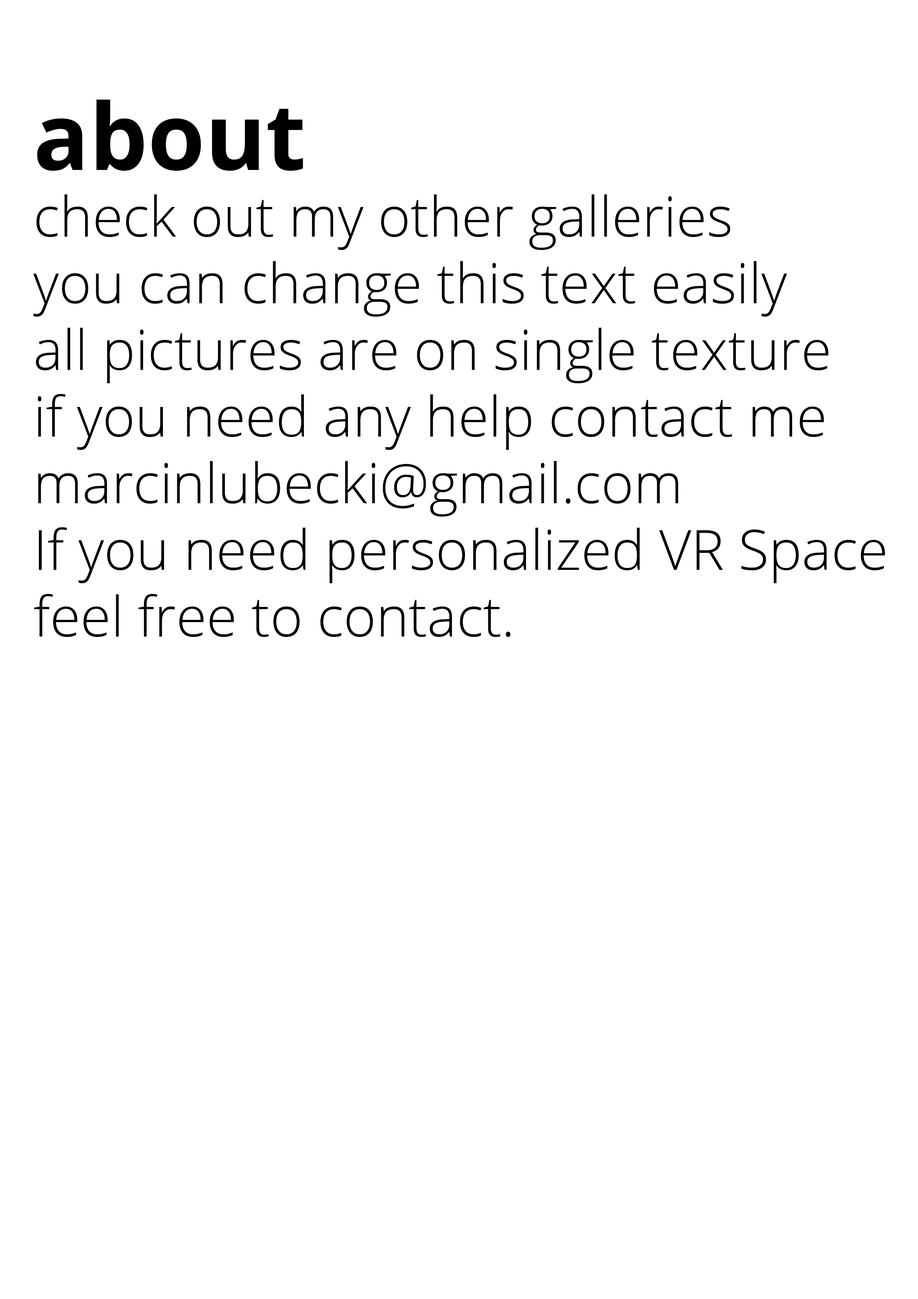
<style>
.page{position:relative;width:918px;height:1299px;background:#ffffff}
.page>*{position:absolute;margin:0}
.t1{font:55.5px "OpenSans-Light";color:#000000}
.t2{font:92.6px "OpenSans-Bold";color:#000000}
</style>
<div class="page">
<p class="t1" style="left:33px;top:100px;width:852px;height:537px"><span class="t2">about<br></span>check out my other galleries<br>you can change this text easily<br>all pictures are on single texture<br>if you need any help contact me<br>marcinlubecki@gmail.com<br>If you need personalized VR Space<br>feel free to contact.</p>
</div>
